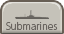
<style>
.page{position:relative;width:64px;height:34px;background:#c5c2b9}
.page>*{position:absolute;margin:0}
.t1{font:10px "UDShinGoPro-Light";color:#6a6560;scale:0.9 1}
</style>
<div class="page">
<p class="t1" style="left:6px;top:21px;width:52px;height:9px">Submarines</p>
</div>
